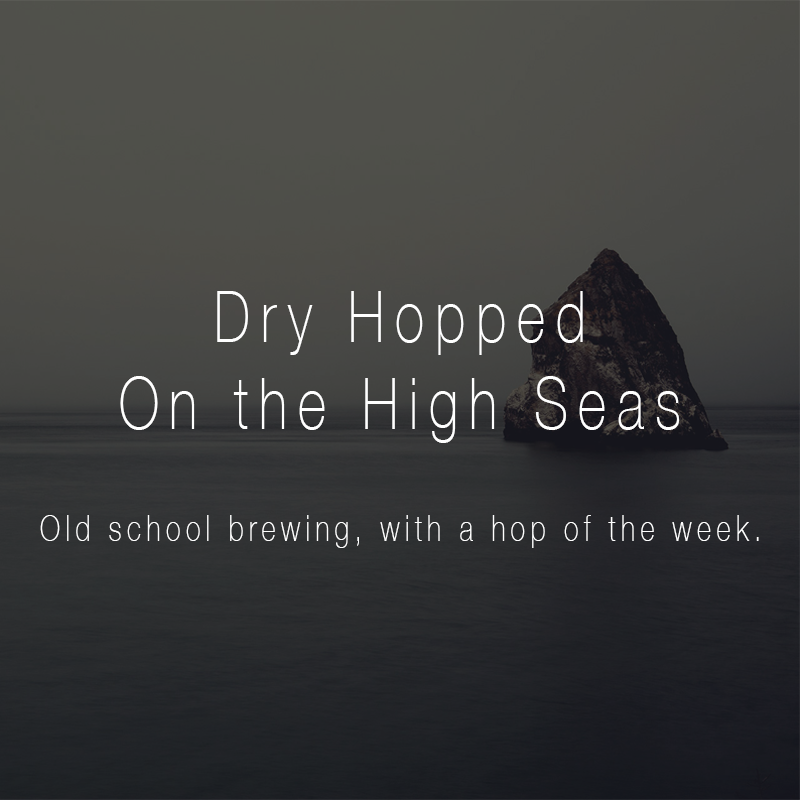
<style>
.page{position:relative;width:800px;height:800px}
.page>*{position:absolute;margin:0}
.t1{font:72px "HelveticaNeue-Thin";letter-spacing:0.2em;color:#ffffff;scale:0.75 1}
.t2{font:36px "HelveticaNeue-Thin";letter-spacing:0.2em;color:#ffffff;scale:0.75 1}
</style>
<div class="page">
<p class="t1" style="left:120px;top:291px;width:560px;height:152px;text-align:center">Dry Hopped<br>On the High Seas</p>
<p class="t2" style="left:40px;top:515px;width:719px;height:33px">Old school brewing, with a hop of the week.</p>
</div>
